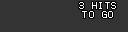
<style>
.page{position:relative;width:128px;height:32px;background:#333333}
.page>*{position:absolute;margin:0}
.t1{font:8px/9px "Terminal";letter-spacing:0.2em;color:#ffffff}
</style>
<div class="page">
<p class="t1" style="left:79px;top:2px;width:37px;height:16px;text-align:center">3 HITS<br>TO GO</p>
</div>
